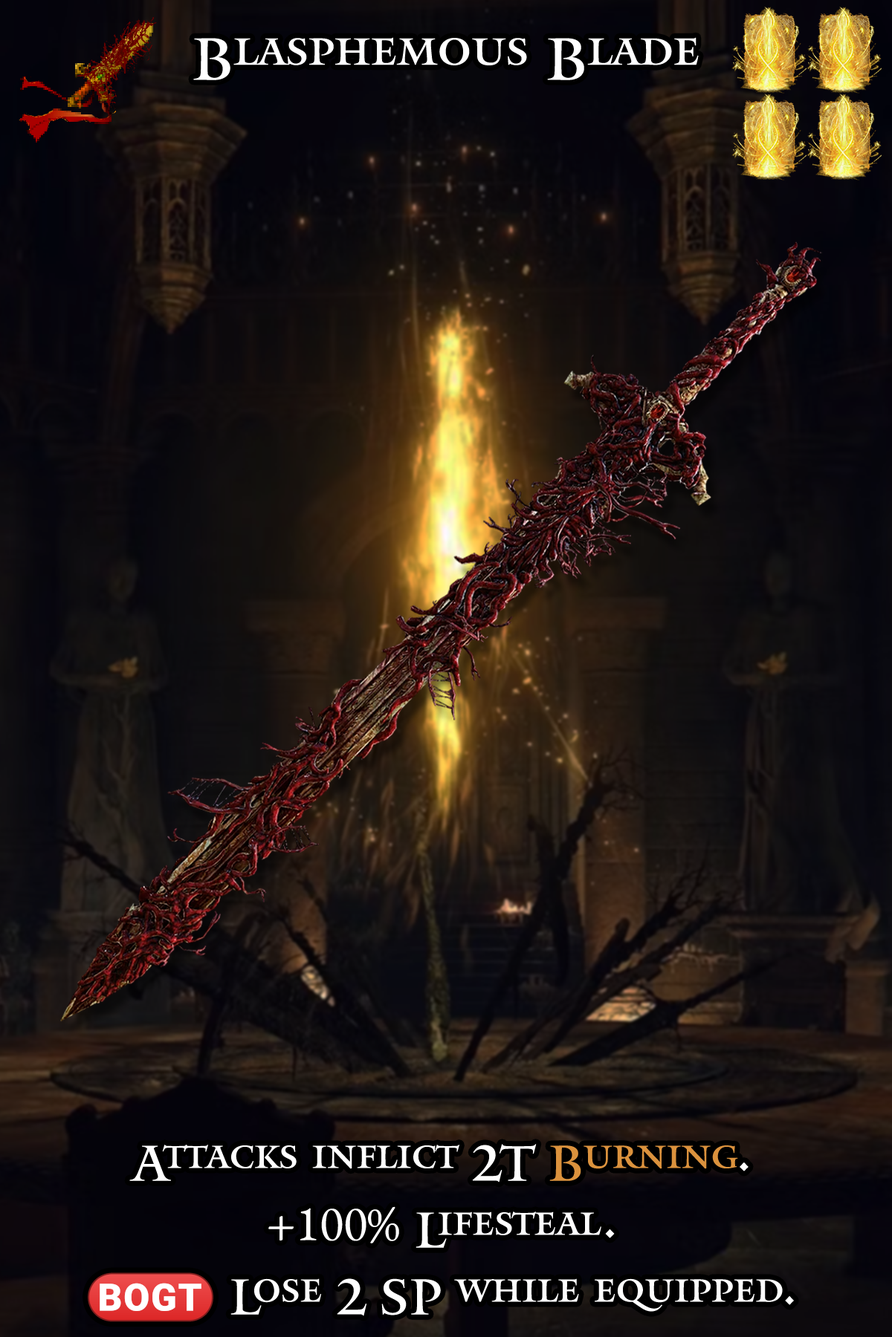
<style>
.page{position:relative;width:892px;height:1337px}
.page>*{position:absolute;margin:0}
.t1{font:101px "Mantinia";color:#ffffff}
.t2{font:85.4px/66.9px "Mantinia";color:#ffffff}
.t3{font:85.4px/66.9px "Mantinia";color:#db923d}
.t4{font:85.4px/66.9px "Mantinia";letter-spacing:-0.2em;color:#ffffff}
.t5{font:85.4px/66.9px "EBGaramond-Regular";color:#ffffff}
.t6{font:85.4px/66.9px "stoogedings-Regular";color:#ffffff}
</style>
<div class="page">
<p class="t1" style="left:193px;top:37px;width:505px;height:43px">Blasphemous Blade</p>
<p class="t2" style="left:88px;top:1144px;width:706px;height:179px;text-align:center">Attacks inflict 2T <span class="t3">Burning</span><span class="t4">.<br></span><span class="t5">+100%</span> Lifesteal<span class="t4"> .</span><br><span class="t6">(BOGT)</span> Lose 2 SP while equipped<span class="t4">.</span></p>
</div>
